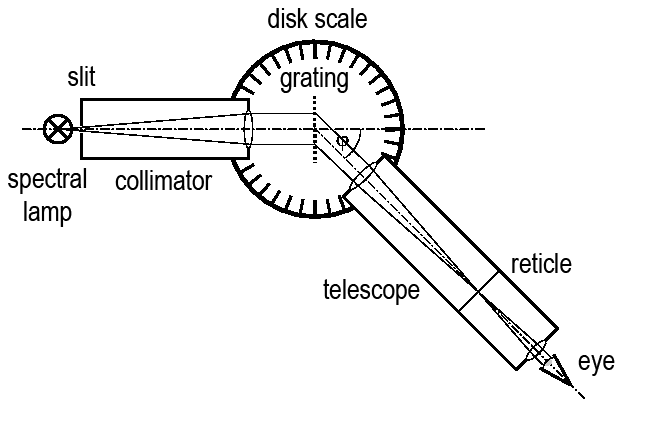
<style>
.page{position:relative;width:662px;height:430px;background:#ffffff}
.page>*{position:absolute;margin:0}
.t1{font:27.8px "ArialNarrow";color:#000000}
</style>
<div class="page">
<p class="t1" style="left:268px;top:8px;width:99px;height:20px">disk scale</p>
<p class="t1" style="left:68px;top:66px;width:28px;height:20px">slit</p>
<p class="t1" style="left:280px;top:67px;width:68px;height:26px">grating</p>
<p class="t1" style="left:8px;top:168px;width:79px;height:59px;text-align:center">spectral<br>lamp</p>
<p class="t1" style="left:115px;top:170px;width:98px;height:20px">collimator</p>
<p class="t1" style="left:512px;top:253px;width:60px;height:20px">reticle</p>
<p class="t1" style="left:323px;top:279px;width:97px;height:26px">telescope</p>
<p class="t1" style="left:578px;top:355px;width:37px;height:21px">eye</p>
</div>
